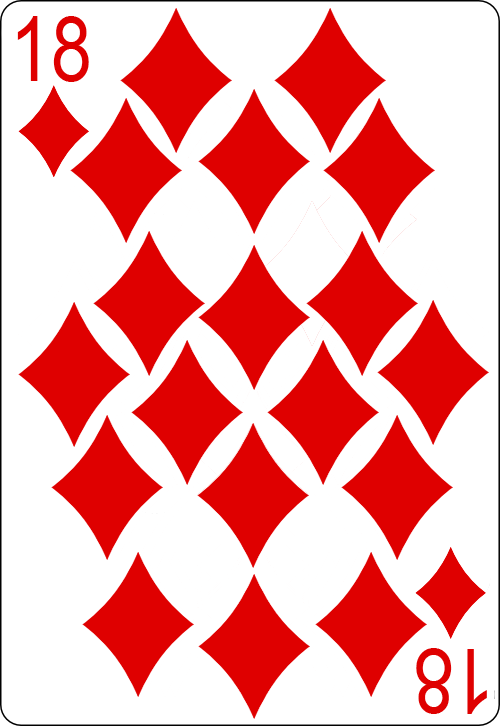
<style>
.page{position:relative;width:500px;height:726px;background:#ffffff}
.page>*{position:absolute;margin:0}
.t1{font:89.8px "ArialNarrow";color:#df0000}
</style>
<div class="page">
<p class="t1" style="left:17px;top:16px;width:72px;height:66px">18</p>
<p class="t1" style="left:416px;top:648px;width:71px;height:66px;rotate:180deg">18</p>
</div>
